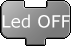
<style>
.page{position:relative;width:71px;height:46px;background:#ffffff}
.page>*{position:absolute;margin:0}
.t1{font:17px "Verdana";color:#ffffff}
</style>
<div class="page">
<p class="t1" style="left:2px;top:14px;width:68px;height:14px">Led OFF</p>
</div>
